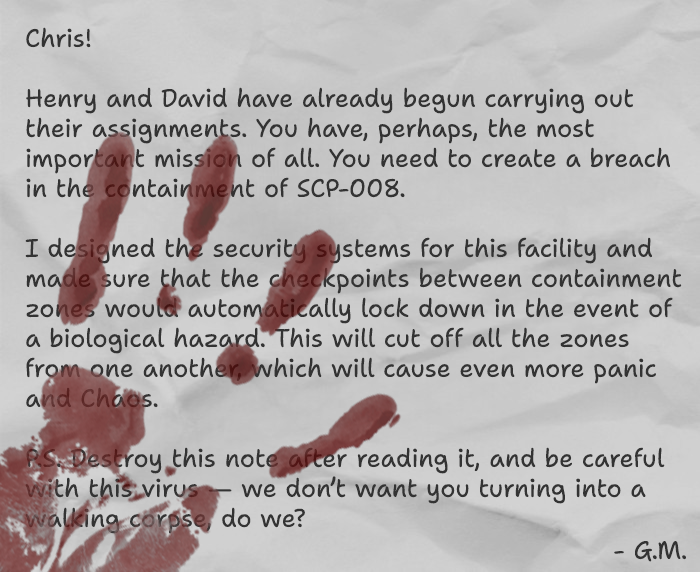
<style>
.page{position:relative;width:700px;height:572px}
.page>*{position:absolute;margin:0}
.t1{font:25px "ShantellSans-Regular";color:#333333}
.t2{font:26px "ShantellSans-Regular";color:#333333}
</style>
<div class="page">
<p class="t1" style="left:25px;top:27px;width:657px;height:507px"><span class="t2"><br></span>Chris!<br><br>Henry and David have already begun carrying out their assignments. You have, perhaps, the most important mission of all. You need to create a breach in the containment of SCP-008.<br><br>I designed the security systems for this facility and made sure that the checkpoints between containment zones would automatically lock down in the event of a biological hazard. This will cut off all the zones from one another, which will cause even more panic and Chaos.<br><br>P.S. Destroy this note after reading it, and be careful with this virus — we don’t want you turning into a walking corpse, do we?</p>
<p class="t1" style="left:614px;top:541px;width:72px;height:21px">- G.M.</p>
</div>
